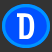
<style>
.page{position:relative;width:52px;height:52px;background:#333333}
.page>*{position:absolute;margin:0}
.t1{font:42.9px "Zyxali";color:#ffffff}
</style>
<div class="page">
<p class="t1" style="left:16px;top:13px;width:19px;height:26px">D</p>
</div>
